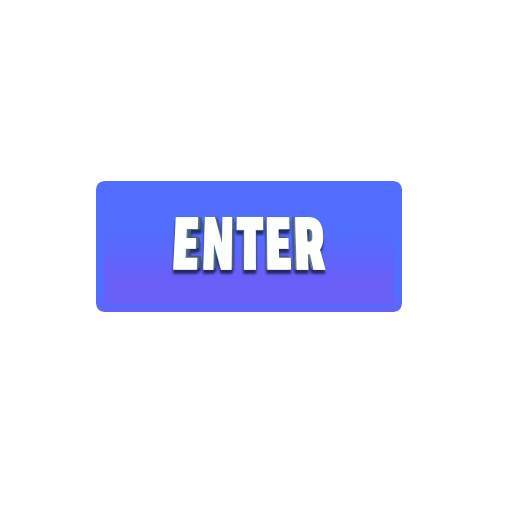
<style>
.page{position:relative;width:512px;height:512px;background:#ffffff}
.page>*{position:absolute;margin:0}
.t1{font:69.7px "AsketCondensed-ExtraBold";letter-spacing:0.025em;color:#fdfffd;scale:0.77 1}
.t2{font:70.4px "AsketCondensed-ExtraBold";letter-spacing:0.025em;color:#fdfffd;scale:0.77 1}
.t3{font:68.3px "AsketCondensed-ExtraBold";letter-spacing:0.025em;color:#fdfffd;scale:0.77 1}
.t4{font:67.6px "AsketCondensed-ExtraBold";letter-spacing:0.025em;color:#fdfffd;scale:0.77 1}
.t5{font:69px "AsketCondensed-ExtraBold";letter-spacing:0.025em;color:#fdfffd;scale:0.77 1}
.t6{font:67px "AsketCondensed-ExtraBold";letter-spacing:0.025em;color:#fdfffd;scale:0.77 1}
.t7{font:66.3px "AsketCondensed-ExtraBold";letter-spacing:0.025em;color:#fdfffd;scale:0.77 1}
</style>
<div class="page">
<p class="t1" style="left:173px;top:217px;width:152px;height:53px">ENTER</p>
<p class="t2" style="left:173px;top:216px;width:153px;height:54px">ENTER</p>
<p class="t3" style="left:174px;top:218px;width:149px;height:52px">ENTER</p>
<p class="t4" style="left:175px;top:217px;width:148px;height:52px">ENTER</p>
<p class="t5" style="left:175px;top:217px;width:150px;height:53px">ENTER</p>
<p class="t6" style="left:176px;top:216px;width:146px;height:52px">ENTER</p>
<p class="t7" style="left:178px;top:218px;width:144px;height:50px">ENTER</p>
</div>
